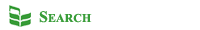
<style>
.page{position:relative;width:200px;height:30px;background:#ffffff}
.page>*{position:absolute;margin:0}
.t1{font:12px "TimesNewRomanPS-BoldMT";color:#399d39}
.t2{font:16px "TimesNewRomanPS-BoldMT";color:#399d39}
</style>
<div class="page">
<p class="t1" style="left:39px;top:11px;width:53px;height:12px"><span class="t2">S</span>EARCH</p>
</div>
